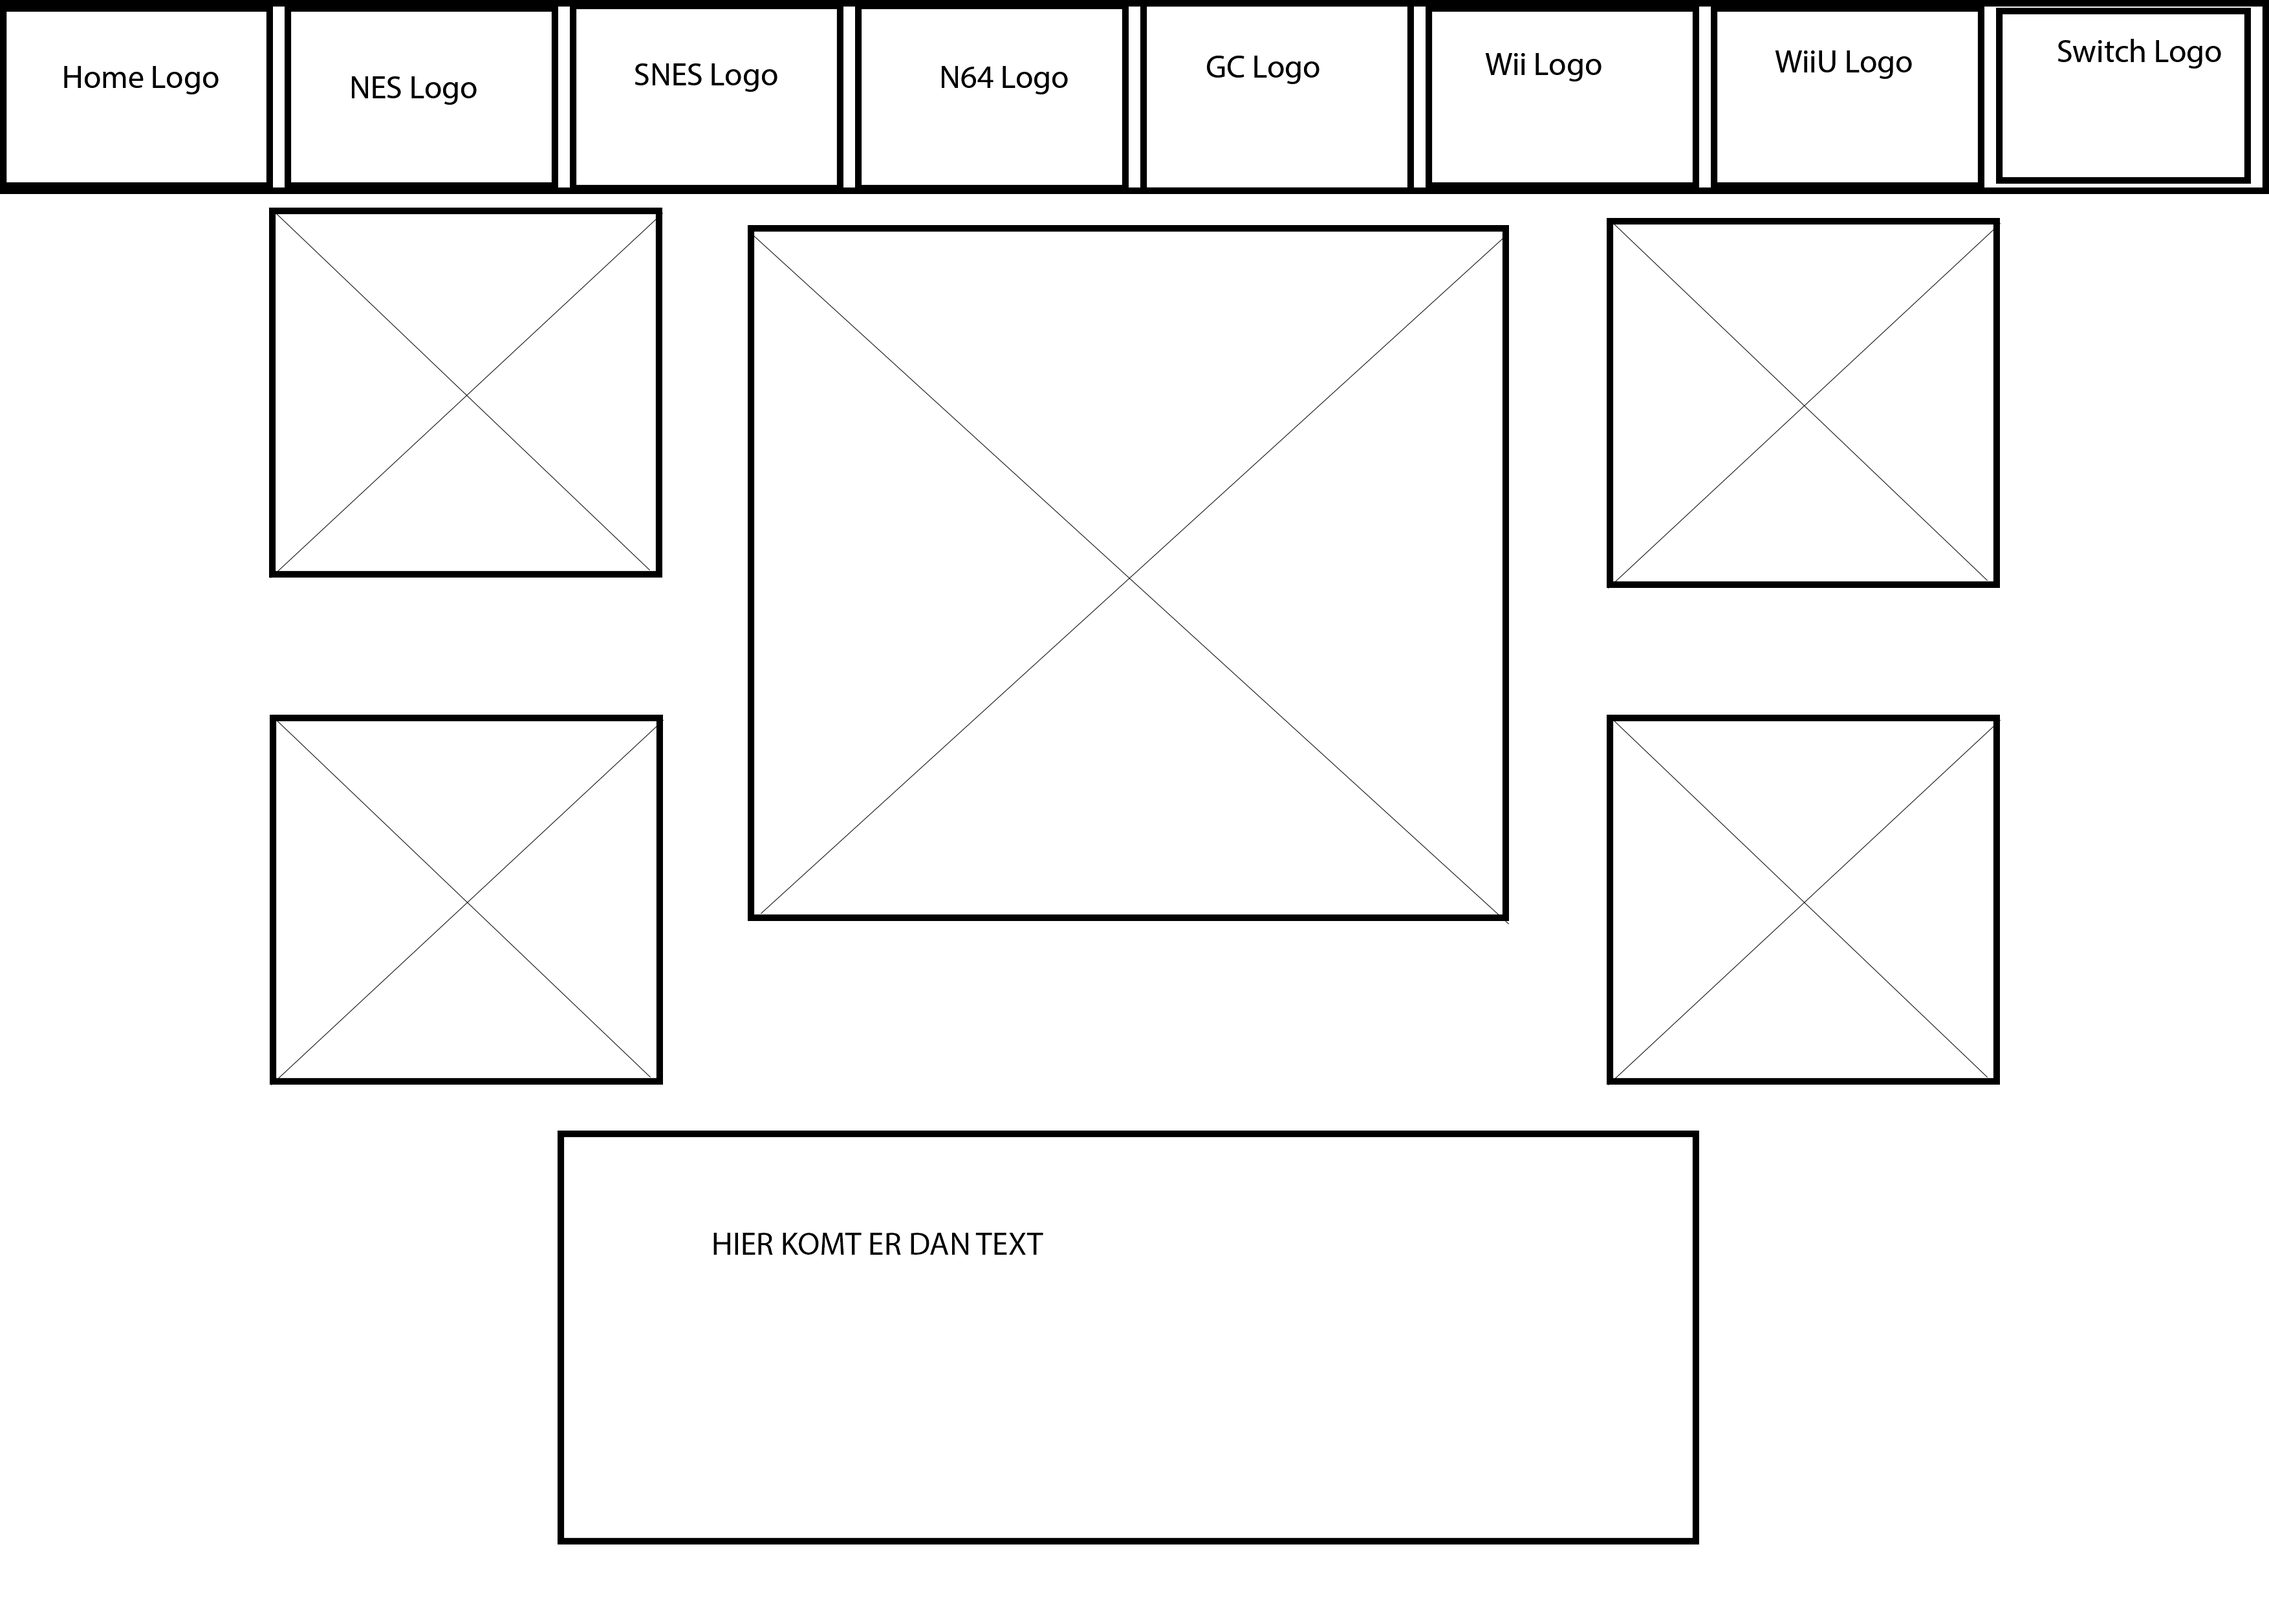
<style>
.page{position:relative;width:2269px;height:1604px;background:#ffffff}
.page>*{position:absolute;margin:0}
.t1{font:7.8px "MyriadPro-Regular";color:#000000}
</style>
<div class="page">
<p class="t1" style="left:2057px;top:39px;width:164px;height:30px">Switch Logo</p>
<p class="t1" style="left:2057px;top:39px;width:164px;height:30px">Switch Logo</p>
<p class="t1" style="left:1485px;top:53px;width:116px;height:28px">Wii Logo</p>
<p class="t1" style="left:1485px;top:53px;width:116px;height:28px">Wii Logo</p>
<p class="t1" style="left:1774px;top:50px;width:138px;height:29px">WiiU Logo</p>
<p class="t1" style="left:1774px;top:50px;width:138px;height:29px">WiiU Logo</p>
<p class="t1" style="left:64px;top:66px;width:155px;height:28px">Home Logo</p>
<p class="t1" style="left:64px;top:66px;width:155px;height:28px">Home Logo</p>
<p class="t1" style="left:634px;top:63px;width:143px;height:29px">SNES Logo</p>
<p class="t1" style="left:634px;top:63px;width:143px;height:29px">SNES Logo</p>
<p class="t1" style="left:942px;top:66px;width:126px;height:28px">N64 Logo</p>
<p class="t1" style="left:942px;top:66px;width:126px;height:28px">N64 Logo</p>
<p class="t1" style="left:1207px;top:56px;width:112px;height:28px">GC Logo</p>
<p class="t1" style="left:1207px;top:56px;width:112px;height:28px">GC Logo</p>
<p class="t1" style="left:352px;top:76px;width:125px;height:29px">NES Logo</p>
<p class="t1" style="left:352px;top:76px;width:125px;height:29px">NES Logo</p>
<p class="t1" style="left:713px;top:1233px;width:330px;height:22px">HIER KOMT ER DAN TEXT</p>
</div>
